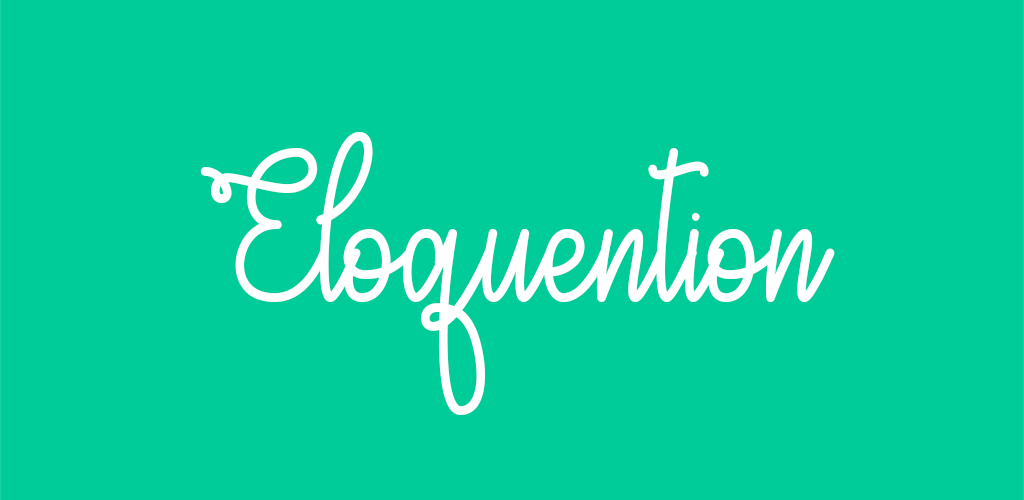
<style>
.page{position:relative;width:1024px;height:500px;background:#00cc99}
.page>*{position:absolute;margin:0}
.t1{font:220.7px "CongratsScript";color:#ffffff;scale:0.96 1}
</style>
<div class="page">
<p class="t1" style="left:200px;top:132px;width:635px;height:283px">Eloquention</p>
</div>
